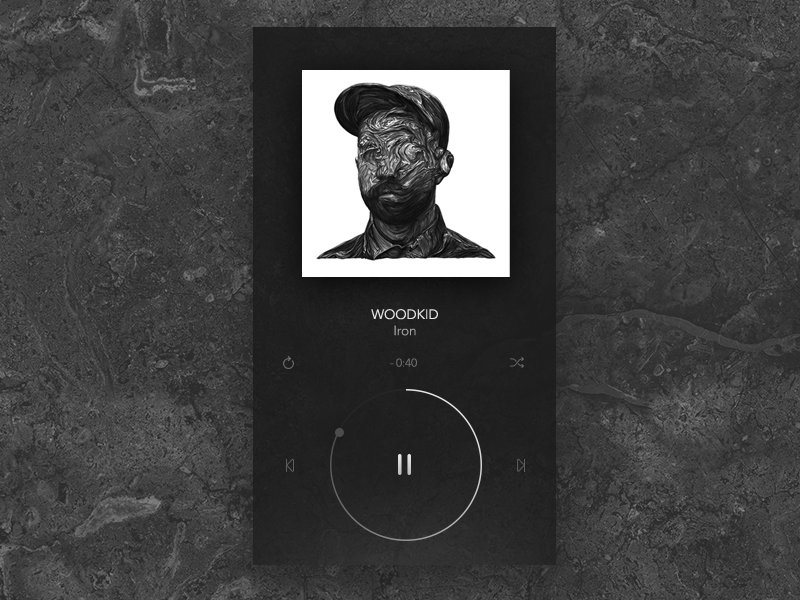
<style>
.page{position:relative;width:800px;height:600px}
.page>*{position:absolute;margin:0}
.t1{font:13.5px "AvenirLTStd-Book";color:#e6e6e6;text-transform:uppercase}
.t2{font:13.5px "AvenirLTStd-Light";color:#a2a2a2}
.t3{font:11px "AvenirLTStd-Light";color:#6f6f6f;scale:1.05 1}
.t4{font:11px "AvenirLTStd-Light";letter-spacing:0.2em;color:#6f6f6f;scale:1.05 1}
</style>
<div class="page">
<p class="t1" style="left:371px;top:309px;width:67px;height:27px;text-align:center">Woodkid<br><span class="t2">Iron</span></p>
<p class="t3" style="left:390px;top:358px;width:27px;height:9px"><span class="t4">-</span>0:40</p>
</div>
